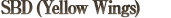
<style>
.page{position:relative;width:171px;height:18px;background:#ffffff}
.page>*{position:absolute;margin:0}
.t1{font:18px "RyuminPro-ExBold";letter-spacing:-0.08em;color:#4a3f32;font-weight:bold;scale:0.9 1}
</style>
<div class="page">
<p class="t1" style="left:1px;top:0px;width:139px;height:18px">SBD (Yellow Wings)</p>
</div>
